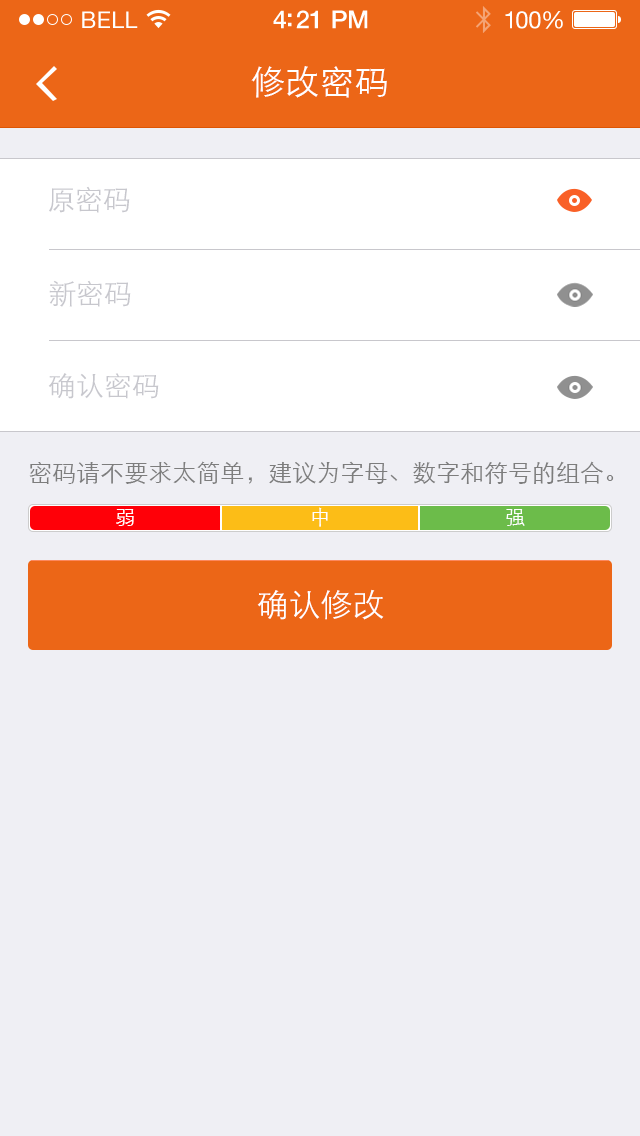
<style>
.page{position:relative;width:640px;height:1136px;background:#efeff4}
.page>*{position:absolute;margin:0}
.t1{font:23px "HelveticaNeue";letter-spacing:0.02em;color:#ffffff}
.t2{font:25px "HelveticaNeue-Medium";letter-spacing:-0.02em;color:#ffffff}
.t3{font:24px "HelveticaNeue";letter-spacing:-0.02em;color:#ffffff}
.t4{font:34px "STXihei";letter-spacing:0.02em;color:#ffffff}
.t5{font:28px "STXihei";color:#c7c7cd}
.t6{font:27.5px "STXihei";color:#c7c7cd}
.t7{font:24px "STXihei";color:#7d7d7d}
.t8{font:20px "STXihei";letter-spacing:-0.02em;color:#ffffff}
.t9{font:32px "STXihei";color:#ffffff}
</style>
<div class="page">
<p class="t1" style="left:82px;top:11px;width:56px;height:17px">BELL</p>
<p class="t2" style="left:273px;top:10px;width:95px;height:19px">4:21 PM</p>
<p class="t3" style="left:505px;top:11px;width:58px;height:18px">100%</p>
<p class="t4" style="left:251px;top:66px;width:136px;height:32px">修改密码</p>
<p class="t5" style="left:49px;top:186px;width:81px;height:27px">原密码</p>
<p class="t5" style="left:49px;top:280px;width:82px;height:27px">新密码</p>
<p class="t6" style="left:48px;top:373px;width:111px;height:26px">确认密码</p>
<p class="t7" style="left:29px;top:461px;width:585px;height:23px">密码请不要求太简单，建议为字母、数字和符号的组合。</p>
<p class="t8" style="left:116px;top:509px;width:18px;height:17px">弱</p>
<p class="t8" style="left:312px;top:507px;width:16px;height:20px">中</p>
<p class="t8" style="left:506px;top:509px;width:19px;height:17px">强</p>
<p class="t9" style="left:257px;top:589px;width:127px;height:31px">确认修改</p>
</div>
